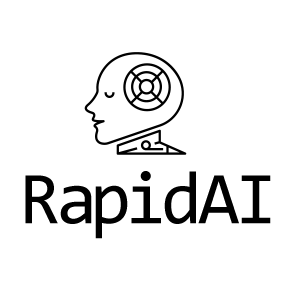
<style>
.page{position:relative;width:289px;height:289px;background:#ffffff}
.page>*{position:absolute;margin:0}
.t1{font:75px "Consolas";color:#000000}
</style>
<div class="page">
<p class="t1" style="left:25px;top:171px;width:246px;height:68px">RapidAI</p>
</div>
